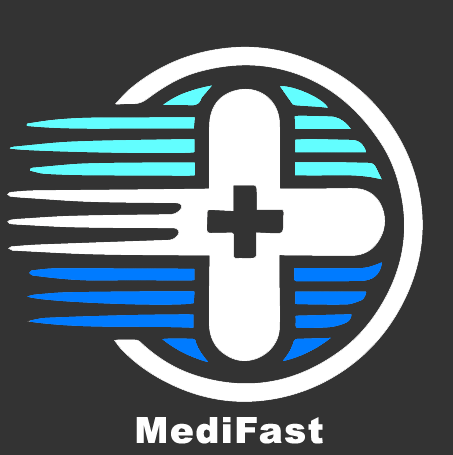
<style>
.page{position:relative;width:453px;height:455px;background:#333333}
.page>*{position:absolute;margin:0}
.t1{font:36px "Arial-Black";letter-spacing:0.04em;color:#fefefe}
</style>
<div class="page">
<p class="t1" style="left:136px;top:417px;width:187px;height:27px">MediFast</p>
</div>
